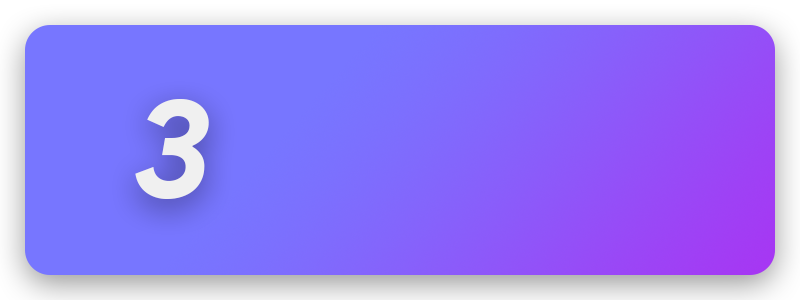
<style>
.page{position:relative;width:800px;height:300px}
.page>*{position:absolute;margin:0}
.t1{font:140px "ProductSans-BoldItalic";letter-spacing:0.46em;color:#f0f0f0}
</style>
<div class="page">
<p class="t1" style="left:135px;top:99px;width:74px;height:100px">3</p>
</div>
